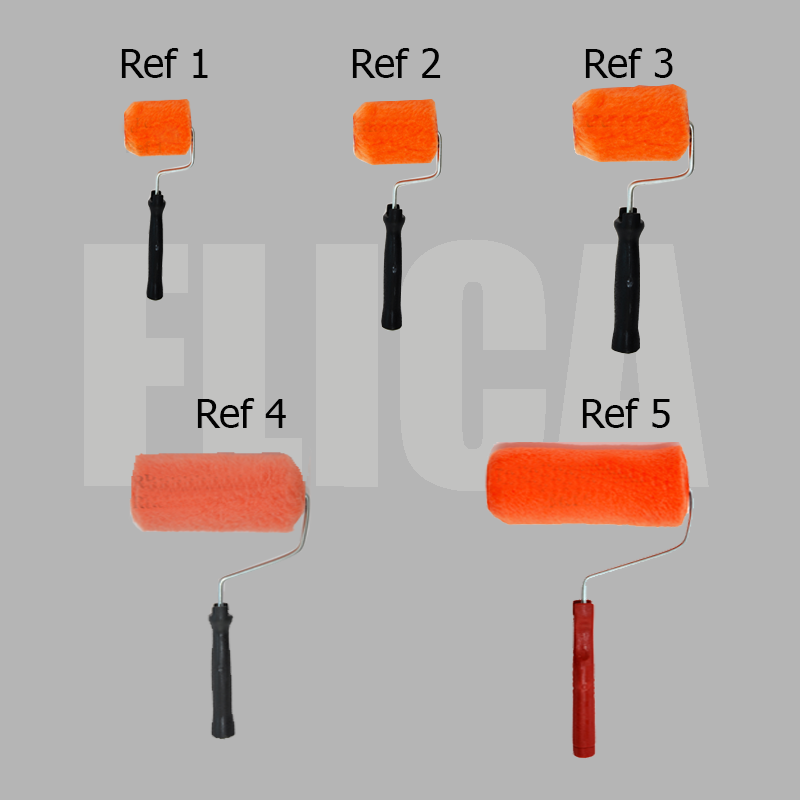
<style>
.page{position:relative;width:800px;height:800px;background:#b5b5b5}
.page>*{position:absolute;margin:0}
.t1{font:40px "Tahoma";color:#020202}
.t2{font:16px "Gadugi-Bold"}
</style>
<div class="page">
<p class="t1" style="left:121px;top:48px;width:87px;height:30px">Ref 1</p>
<p class="t1" style="left:352px;top:48px;width:89px;height:30px">Ref 2</p>
<p class="t1" style="left:585px;top:48px;width:88px;height:30px">Ref 3</p>
<p class="t2" style="left:126px;top:141px;width:36px;height:12px">Ref 1</p>
<p class="t1" style="left:197px;top:398px;width:89px;height:30px">Ref 4</p>
<p class="t1" style="left:582px;top:398px;width:88px;height:30px">Ref 5</p>
</div>
